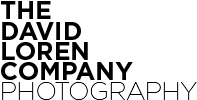
<style>
.page{position:relative;width:197px;height:100px;background:#ffffff}
.page>*{position:absolute;margin:0}
.t1{font:25.2px/20.2px "Gotham-Bold";letter-spacing:-0.01em;color:#010101;text-transform:uppercase}
.t2{font:25.2px/20.2px "Gotham-Thin";letter-spacing:-0.01em;color:#010101;text-transform:uppercase}
</style>
<div class="page">
<p class="t1" style="left:1px;top:1px;width:196px;height:99px">The <br>David <br>Loren <br>Company<br><span class="t2">PHOTOGRAPHY</span></p>
</div>
